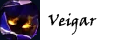
<style>
.page{position:relative;width:140px;height:40px;background:#ffffff}
.page>*{position:absolute;margin:0}
.t1{font:16px "VinerHandITC";color:#000000}
</style>
<div class="page">
<p class="t1" style="left:48px;top:13px;width:49px;height:22px">Veigar</p>
</div>
